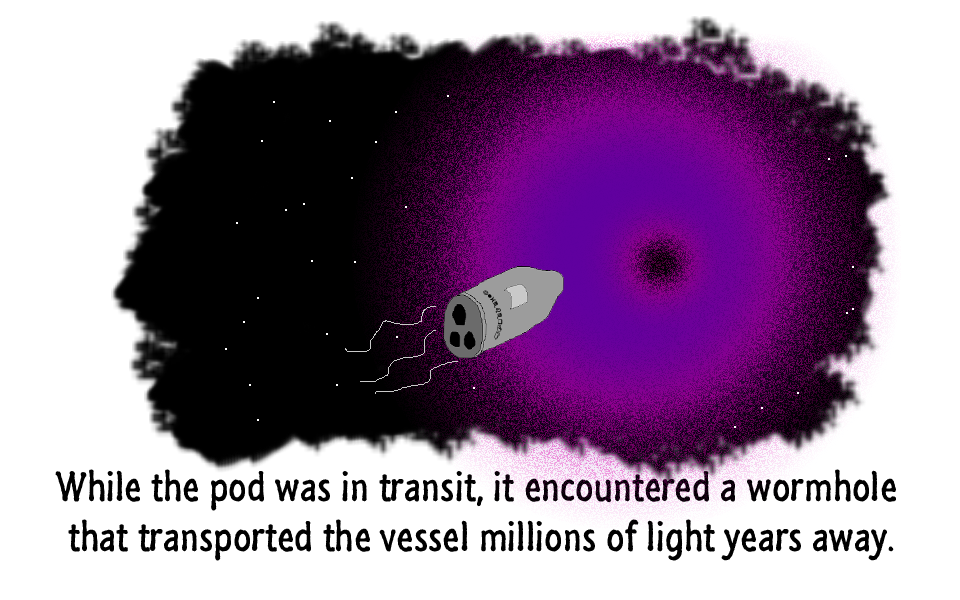
<style>
.page{position:relative;width:960px;height:600px;background:#ffffff}
.page>*{position:absolute;margin:0}
.t1{font:42px "SegoeMarker";color:#000000}
</style>
<div class="page">
<p class="t1" style="left:55px;top:469px;width:841px;height:92px;text-align:center">While the pod was in transit, it encountered a wormhole <br>that transported the vessel millions of light years away.</p>
</div>
